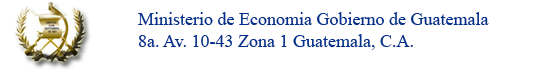
<style>
.page{position:relative;width:539px;height:71px;background:#ffffff}
.page>*{position:absolute;margin:0}
.t1{font:18px "TimesNewRomanPSMT";color:#022f8a}
</style>
<div class="page">
<p class="t1" style="left:138px;top:12px;width:351px;height:38px">Ministerio de Economia Gobierno de Guatemala<br>8a. Av. 10-43 Zona 1 Guatemala, C.A.</p>
</div>
